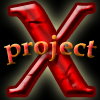
<style>
.page{position:relative;width:100px;height:100px}
.page>*{position:absolute;margin:0}
.t1{font:130px "BookAntiqua-Bold"}
.t2{font:27px "BookAntiqua-Bold"}
</style>
<div class="page">
<p class="t1" style="left:9px;top:3px;width:84px;height:92px">X</p>
<p class="t2" style="left:4px;top:35px;width:93px;height:30px">project</p>
</div>
